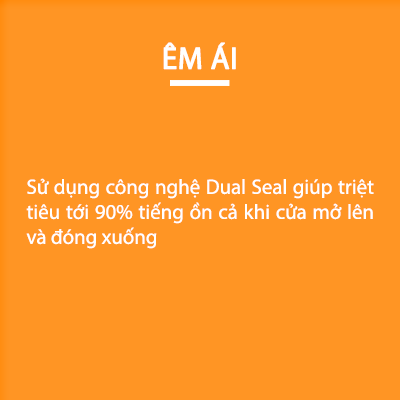
<style>
.page{position:relative;width:400px;height:400px;background:#ff9524}
.page>*{position:absolute;margin:0}
.t1{font:20.8px "MyriadPro-Regular";color:#ffffff}
.t2{font:31.2px "MyriadPro-Regular";color:#ffffff;font-weight:bold}
</style>
<div class="page">
<p class="t1" style="left:26px;top:42px;width:348px;height:207px;text-align:justify"><span class="t2">ÊM ÁI<br></span><br><br><br><br>Sử dụng công nghệ Dual Seal giúp triệt tiêu tới 90% tiếng ồn cả khi cửa mở lên và đóng xuống</p>
</div>
